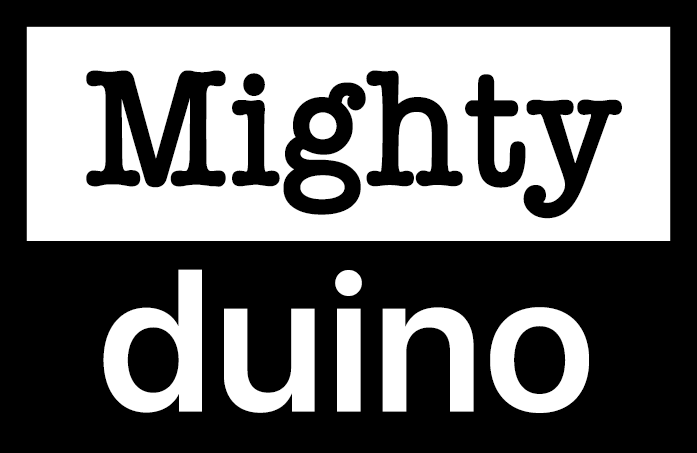
<style>
.page{position:relative;width:697px;height:453px;background:#000000}
.page>*{position:absolute;margin:0}
.t1{font:171.3px "AmericanTypewriter-Semibold";letter-spacing:0.01em;color:#000000;scale:0.9 1}
.t2{font:171.3px "AmericanTypewriter-Semibold";letter-spacing:0.01em;color:#000000;text-transform:uppercase;scale:0.9 1}
.t3{font:191.9px "SFUIDisplay-Semibold";letter-spacing:0.01em;color:#ffffff}
</style>
<div class="page">
<p class="t1" style="left:86px;top:70px;width:536px;height:149px"><span class="t2">m</span>ighty</p>
<p class="t3" style="left:103px;top:269px;width:486px;height:144px">duino</p>
</div>
